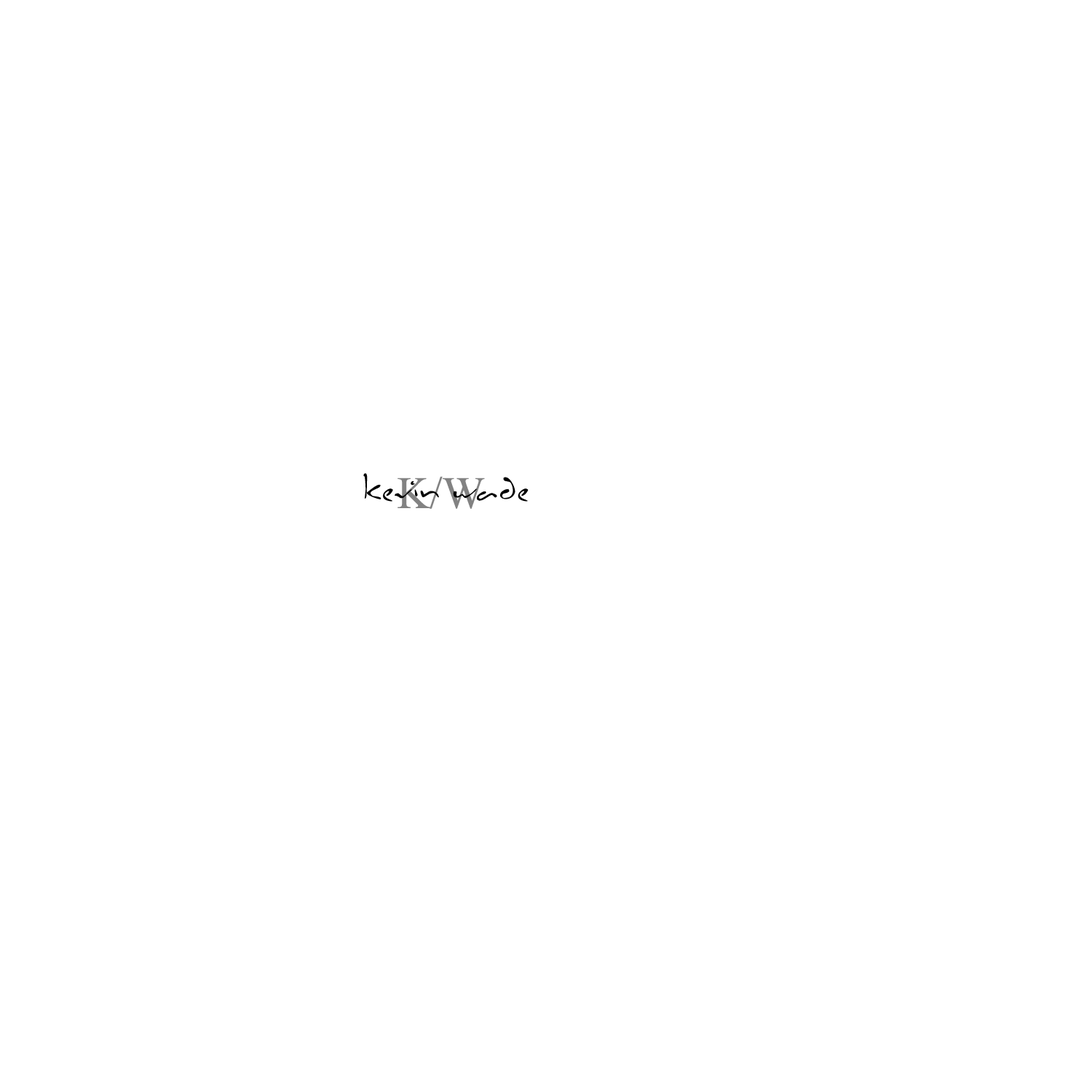
<style>
.page{position:relative;width:1092px;height:1092px;background:#ffffff}
.page>*{position:absolute;margin:0}
.t1{font:34.9px "Inkburrow";color:#000000}
.t2{font:58.2px "Kokila";color:#828282}
</style>
<div class="page">
<p class="t1" style="left:363px;top:473px;width:166px;height:29px">kevin wade</p>
<p class="t2" style="left:397px;top:476px;width:88px;height:33px">K/W</p>
</div>
